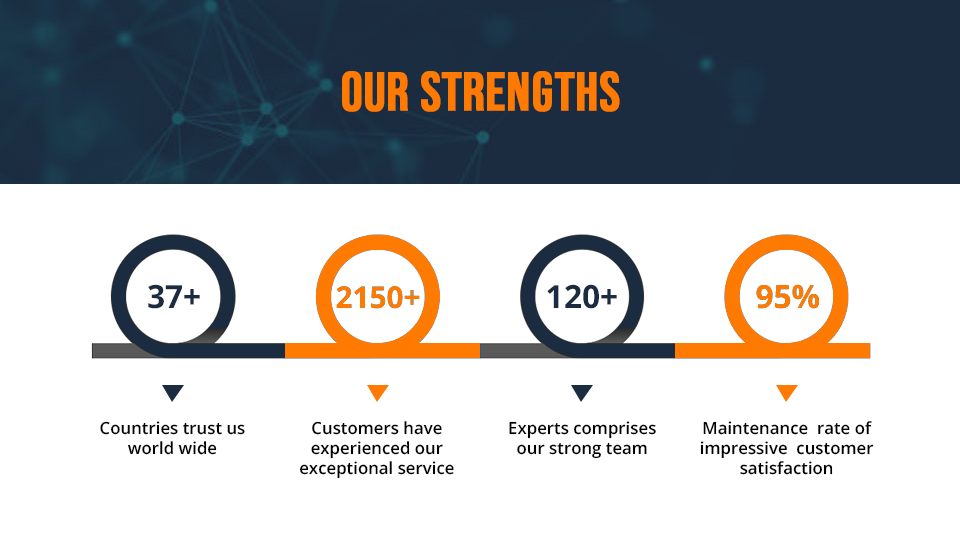
<style>
.page{position:relative;width:960px;height:540px;background:#ffffff}
.page>*{position:absolute;margin:0}
.t1{font:54px "BebasNeue-Regular";color:#ff7a00;font-weight:bold}
.t2{font:32px "OpenSans-Bold";color:#1b2c40}
.t3{font:30px "OpenSans-Bold";color:#ff7a00}
.t4{font:32px "OpenSans-Bold";color:#ff7a00}
.t5{font:16.8px "OpenSans-SemiBold";color:#000000}
</style>
<div class="page">
<p class="t1" style="left:342px;top:71px;width:278px;height:41px">Our strengths</p>
<p class="t2" style="left:148px;top:284px;width:52px;height:25px">37+</p>
<p class="t3" style="left:336px;top:286px;width:84px;height:23px">2150+</p>
<p class="t2" style="left:547px;top:284px;width:70px;height:25px">120+</p>
<p class="t4" style="left:756px;top:284px;width:63px;height:25px">95%</p>
<p class="t5" style="left:100px;top:421px;width:145px;height:34px;text-align:center">Countries trust us<br>world wide</p>
<p class="t5" style="left:299px;top:421px;width:155px;height:58px;text-align:center">Customers have<br>experienced our<br>exceptional service</p>
<p class="t5" style="left:509px;top:421px;width:147px;height:38px;text-align:center">Experts comprises<br>our strong team</p>
<p class="t5" style="left:700px;top:421px;width:174px;height:54px;text-align:center">Maintenance  rate of impressive  customer satisfaction</p>
</div>
